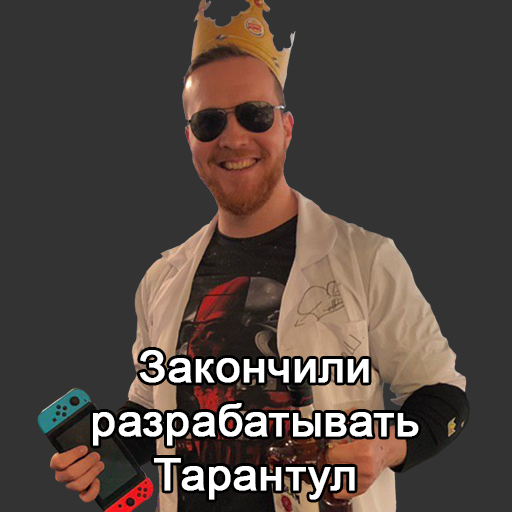
<style>
.page{position:relative;width:512px;height:512px;background:#333333}
.page>*{position:absolute;margin:0}
.t1{font:45px "ArialMT";color:#ffffff;font-weight:bold}
</style>
<div class="page">
<p class="t1" style="left:93px;top:350px;width:326px;height:150px;text-align:center">Закончили<br>разрабатывать<br>Тарантул</p>
</div>
